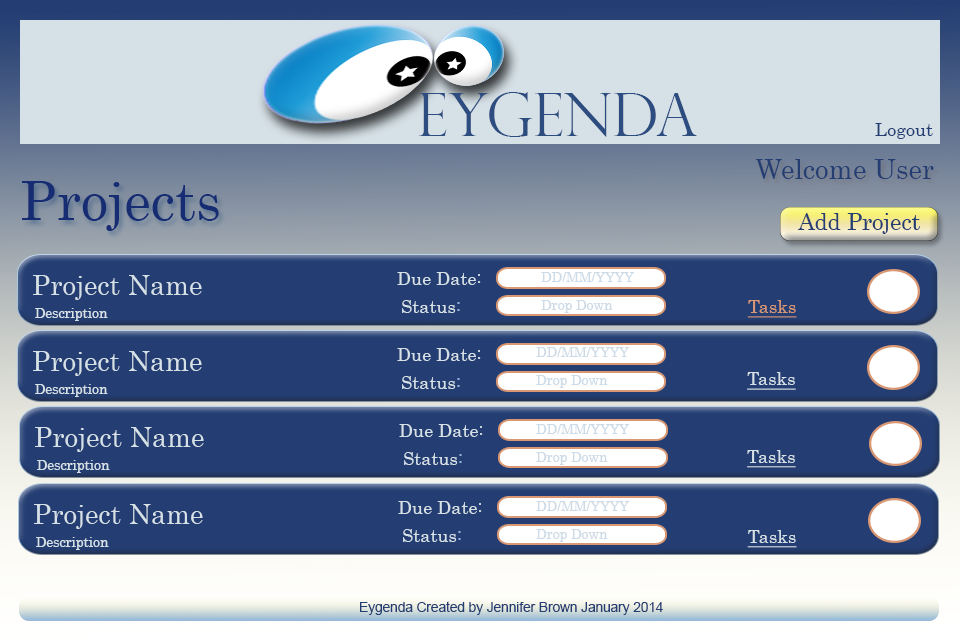
<style>
.page{position:relative;width:960px;height:640px;background:#243e73}
.page>*{position:absolute;margin:0}
.t1{font:60px "PerpetuaTitlingMT-Light";color:#2d4d80}
.t2{font:18.1px "Century";color:#243e73}
.t3{font:27.2px "Century";color:#243e73}
.t4{font:54.3px "Century";color:#172d73}
.t5{font:22.6px "Century";color:#243e73}
.t6{font:27.2px "Century";color:#d6e1e7}
.t7{font:18.1px "Century";color:#d6e1e7}
.t8{font:13.6px "Century";color:#cddbe7}
.t9{font:18.1px "Century";color:#91b7d9}
.t10{font:18.1px "Century";color:#d99873;text-decoration:underline}
.t11{font:13.6px "Century";color:#d6e1e7}
.t12{font:18.1px "Century";color:#d6e1e7;text-decoration:underline}
.t13{font:13.6px "ArialMT";color:#243e73}
</style>
<div class="page">
<p class="t1" style="left:419px;top:92px;width:278px;height:45px">EYGENDA</p>
<p class="t2" style="left:875px;top:123px;width:58px;height:16px">Logout</p>
<p class="t3" style="left:756px;top:159px;width:178px;height:20px">Welcome User</p>
<p class="t4" style="left:22px;top:181px;width:197px;height:50px">Projects</p>
<p class="t5" style="left:798px;top:213px;width:122px;height:21px">Add Project</p>
<p class="t6" style="left:33px;top:275px;width:169px;height:25px">Project Name</p>
<p class="t7" style="left:397px;top:272px;width:84px;height:13px">Due Date:</p>
<p class="t8" style="left:541px;top:272px;width:94px;height:10px">DD/MM/YYYY</p>
<p class="t7" style="left:402px;top:300px;width:58px;height:13px">Status<span class="t9">:</span></p>
<p class="t8" style="left:541px;top:300px;width:72px;height:13px">Drop Down</p>
<p class="t10" style="left:747px;top:300px;width:50px;height:18px">Tasks</p>
<p class="t11" style="left:35px;top:308px;width:73px;height:13px">Description</p>
<p class="t6" style="left:33px;top:351px;width:169px;height:25px">Project Name</p>
<p class="t7" style="left:397px;top:348px;width:84px;height:13px">Due Date:</p>
<p class="t8" style="left:536px;top:347px;width:94px;height:10px">DD/MM/YYYY</p>
<p class="t7" style="left:402px;top:376px;width:58px;height:13px">Status<span class="t9">:</span></p>
<p class="t8" style="left:536px;top:375px;width:72px;height:13px">Drop Down</p>
<p class="t12" style="left:747px;top:372px;width:49px;height:18px">Tasks</p>
<p class="t11" style="left:35px;top:384px;width:73px;height:13px">Description</p>
<p class="t7" style="left:399px;top:424px;width:84px;height:13px">Due Date:</p>
<p class="t8" style="left:536px;top:424px;width:94px;height:10px">DD/MM/YYYY</p>
<p class="t6" style="left:35px;top:427px;width:169px;height:25px">Project Name</p>
<p class="t11" style="left:37px;top:460px;width:73px;height:13px">Description</p>
<p class="t7" style="left:404px;top:452px;width:58px;height:13px">Status<span class="t9">:</span></p>
<p class="t8" style="left:536px;top:452px;width:72px;height:13px">Drop Down</p>
<p class="t12" style="left:747px;top:450px;width:49px;height:18px">Tasks</p>
<p class="t6" style="left:34px;top:504px;width:169px;height:25px">Project Name</p>
<p class="t7" style="left:398px;top:501px;width:84px;height:13px">Due Date:</p>
<p class="t8" style="left:536px;top:501px;width:94px;height:10px">DD/MM/YYYY</p>
<p class="t7" style="left:403px;top:529px;width:58px;height:13px">Status<span class="t9">:</span></p>
<p class="t8" style="left:536px;top:529px;width:72px;height:13px">Drop Down</p>
<p class="t12" style="left:747px;top:530px;width:50px;height:18px">Tasks</p>
<p class="t11" style="left:36px;top:537px;width:73px;height:13px">Description</p>
<p class="t13" style="left:360px;top:601px;width:303px;height:14px">Eygenda Created by Jennifer Brown January 2014</p>
</div>
